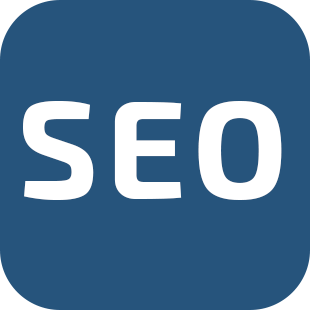
<style>
.page{position:relative;width:310px;height:310px;background:#26547c}
.page>*{position:absolute;margin:0}
.t1{font:140px "Exo2-Bold";letter-spacing:0.05em;color:#ffffff}
</style>
<div class="page">
<p class="t1" style="left:23px;top:101px;width:259px;height:99px">SEO</p>
</div>
